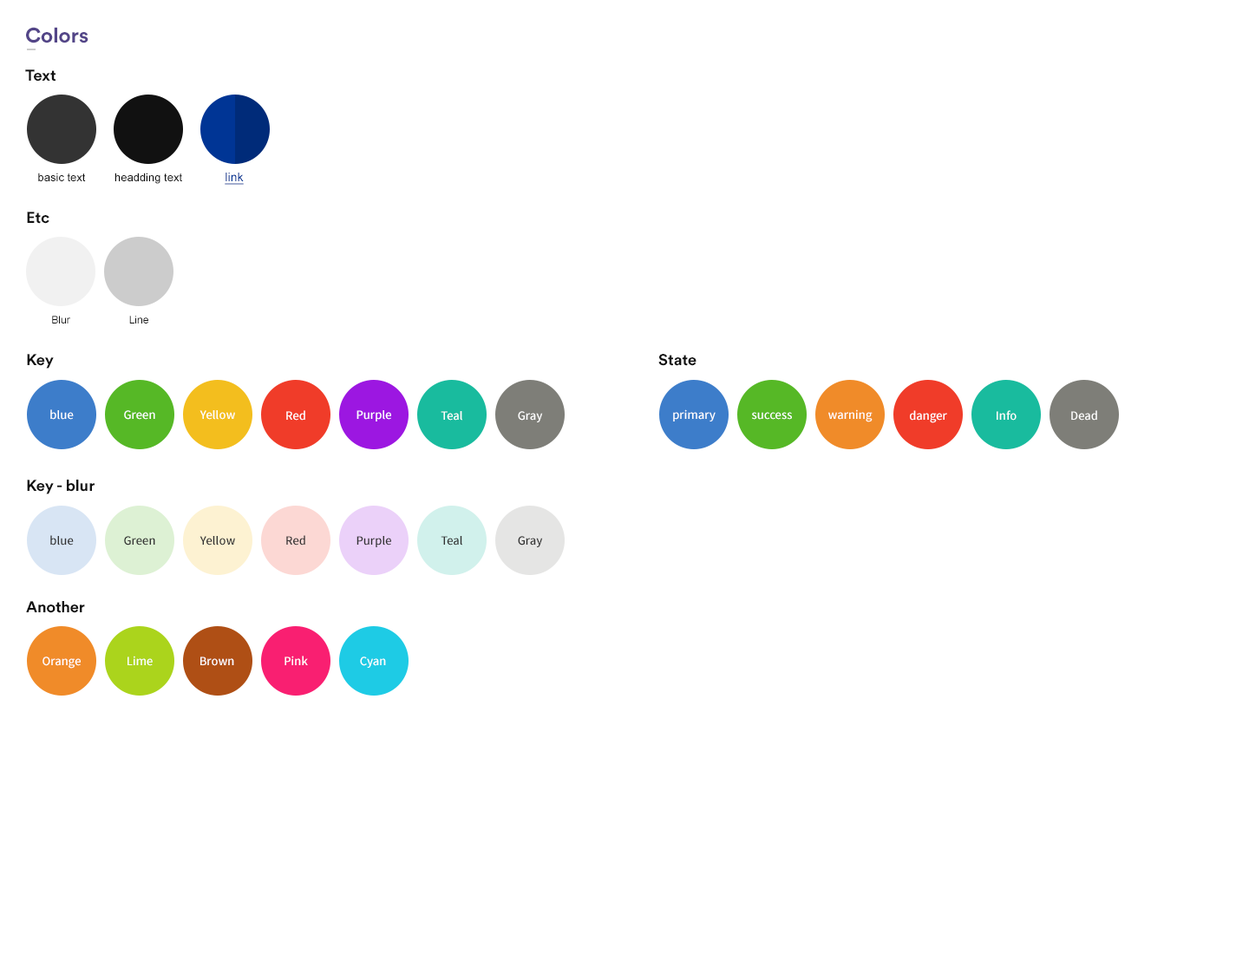
<style>
.page{position:relative;width:1249px;height:954px;background:#ffffff}
.page>*{position:absolute;margin:0}
.t1{font:20.8px "CircularStd-Bold";color:#534588}
.t2{font:15.6px "CircularStd-Bold";color:#111111}
.t3{font:11.3px "ArialMT";color:#111111}
.t4{font:12.1px "ArialMT";color:#003595;text-decoration:underline}
.t5{font:10.4px "ArialMT";color:#111111}
.t6{font:11.3px "SourceHanSansKR-Medium";color:#ffffff}
.t7{font:11.3px "SourceHanSansKR-Medium";color:#333333}
</style>
<div class="page">
<p class="t1" style="left:26px;top:27px;width:62px;height:16px">Colors</p>
<p class="t2" style="left:25px;top:69px;width:31px;height:13px">Text</p>
<p class="t3" style="left:38px;top:173px;width:48px;height:8px">basic text</p>
<p class="t3" style="left:115px;top:173px;width:67px;height:11px">headding text</p>
<p class="t4" style="left:225px;top:173px;width:19px;height:12px">link</p>
<p class="t2" style="left:27px;top:212px;width:22px;height:12px">Etc</p>
<p class="t5" style="left:52px;top:316px;width:18px;height:8px">Blur</p>
<p class="t5" style="left:129px;top:316px;width:19px;height:8px">Line</p>
<p class="t2" style="left:27px;top:354px;width:27px;height:15px">Key</p>
<p class="t2" style="left:659px;top:354px;width:38px;height:12px">State</p>
<p class="t6" style="left:50px;top:410px;width:24px;height:10px">blue</p>
<p class="t6" style="left:124px;top:410px;width:31px;height:10px">Green</p>
<p class="t6" style="left:200px;top:410px;width:35px;height:10px">Yellow</p>
<p class="t6" style="left:286px;top:410px;width:19px;height:11px">Red</p>
<p class="t6" style="left:357px;top:410px;width:34px;height:12px">Purple</p>
<p class="t6" style="left:441px;top:411px;width:21px;height:10px">Teal</p>
<p class="t6" style="left:518px;top:411px;width:25px;height:12px">Gray</p>
<p class="t6" style="left:673px;top:410px;width:43px;height:12px">primary</p>
<p class="t6" style="left:752px;top:412px;width:40px;height:8px">success</p>
<p class="t6" style="left:829px;top:410px;width:44px;height:13px">warning</p>
<p class="t6" style="left:910px;top:410px;width:37px;height:13px">danger</p>
<p class="t6" style="left:997px;top:410px;width:20px;height:11px">Info</p>
<p class="t6" style="left:1072px;top:410px;width:26px;height:11px">Dead</p>
<p class="t2" style="left:27px;top:480px;width:68px;height:15px">Key - blur</p>
<p class="t7" style="left:50px;top:535px;width:24px;height:11px">blue</p>
<p class="t7" style="left:124px;top:536px;width:31px;height:10px">Green</p>
<p class="t7" style="left:200px;top:536px;width:35px;height:10px">Yellow</p>
<p class="t7" style="left:286px;top:535px;width:19px;height:11px">Red</p>
<p class="t7" style="left:357px;top:536px;width:34px;height:11px">Purple</p>
<p class="t7" style="left:441px;top:536px;width:21px;height:10px">Teal</p>
<p class="t7" style="left:518px;top:536px;width:25px;height:11px">Gray</p>
<p class="t2" style="left:26px;top:601px;width:59px;height:12px">Another</p>
<p class="t6" style="left:43px;top:657px;width:38px;height:12px">Orange</p>
<p class="t6" style="left:128px;top:656px;width:25px;height:10px">Lime</p>
<p class="t6" style="left:200px;top:657px;width:34px;height:9px">Brown</p>
<p class="t6" style="left:285px;top:656px;width:23px;height:9px">Pink</p>
<p class="t6" style="left:360px;top:657px;width:26px;height:11px">Cyan</p>
</div>
